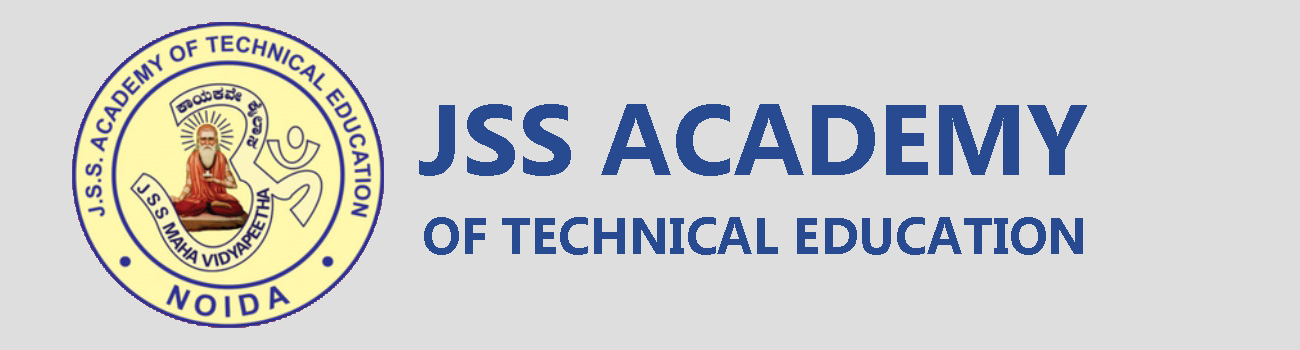
<style>
.page{position:relative;width:1300px;height:350px;background:#dedede}
.page>*{position:absolute;margin:0}
.t1{font:100px "Ebrima-Bold";color:#274a90}
.t2{font:51px "Ebrima-Bold";color:#274a90}
</style>
<div class="page">
<p class="t1" style="left:419px;top:104px;width:668px;height:72px">JSS ACADEMY</p>
<p class="t2" style="left:424px;top:217px;width:659px;height:38px">OF TECHNICAL EDUCATION</p>
</div>
